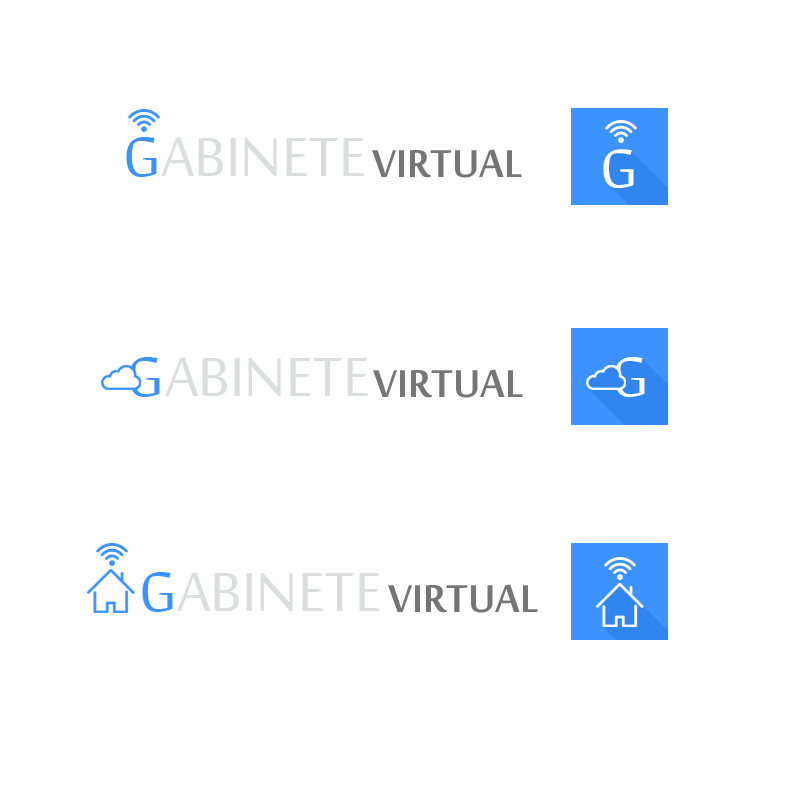
<style>
.page{position:relative;width:800px;height:800px;background:#ffffff}
.page>*{position:absolute;margin:0}
.t1{font:75.4px "SakkalMajalla";color:#dcdddd}
.t2{font:75.4px "SakkalMajalla";color:#3c93ff}
.t3{font:59.4px "MoolBoran";color:#767676}
</style>
<div class="page">
<p class="t1" style="left:126px;top:137px;width:238px;height:40px"><span class="t2">G</span>ABINETE</p>
<p class="t3" style="left:372px;top:149px;width:150px;height:29px">VIRTUAL</p>
<p class="t3" style="left:373px;top:369px;width:150px;height:29px">VIRTUAL</p>
<p class="t1" style="left:142px;top:572px;width:238px;height:40px"><span class="t2">G</span>ABINETE</p>
<p class="t3" style="left:388px;top:584px;width:150px;height:29px">VIRTUAL</p>
</div>
